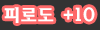
<style>
.page{position:relative;width:100px;height:30px;background:#333333}
.page>*{position:absolute;margin:0}
.t1{font:17px "HaanSomangB";color:#ffffff}
</style>
<div class="page">
<p class="t1" style="left:4px;top:7px;width:91px;height:16px">피로도 +10</p>
</div>
